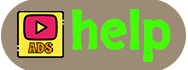
<style>
.page{position:relative;width:188px;height:70px;background:#9c8c75}
.page>*{position:absolute;margin:0}
.t1{font:53.3px "Skranji";color:#42ff00}
</style>
<div class="page">
<p class="t1" style="left:72px;top:9px;width:99px;height:53px">help</p>
</div>
